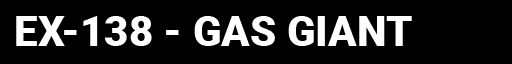
<style>
.page{position:relative;width:512px;height:64px;background:#000000}
.page>*{position:absolute;margin:0}
.t1{font:42px "Roboto-Black";color:#ffffff}
</style>
<div class="page">
<p class="t1" style="left:16px;top:16px;width:396px;height:30px">EX-138 - GAS GIANT</p>
</div>
